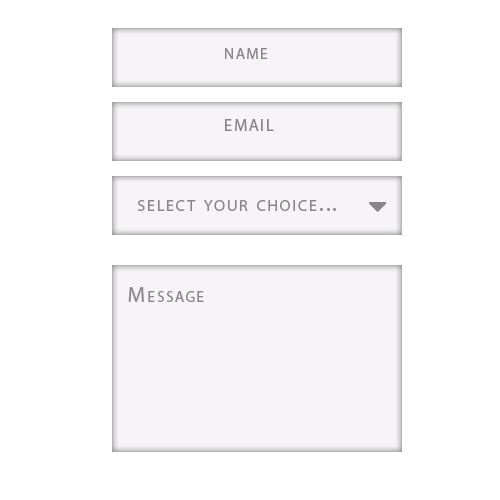
<style>
.page{position:relative;width:500px;height:500px;background:#ffffff}
.page>*{position:absolute;margin:0}
.t1{font:22.2px "MyriadPro-Regular";letter-spacing:0.1em;color:#898588;font-variant:small-caps}
.t2{font:23.6px "MyriadPro-Regular";letter-spacing:0.1em;color:#898588;font-variant:small-caps}
.t3{font:23.3px "MyriadPro-Regular";letter-spacing:0.1em;color:#898588;font-variant:small-caps}
.t4{font:21.9px "MyriadPro-Regular";letter-spacing:0.1em;color:#898588;font-variant:small-caps}
</style>
<div class="page">
<p class="t1" style="left:225px;top:48px;width:43px;height:12px">name</p>
<p class="t2" style="left:225px;top:119px;width:49px;height:12px">email</p>
<p class="t3" style="left:137px;top:200px;width:199px;height:11px">select your choice...</p>
<p class="t4" style="left:128px;top:287px;width:76px;height:15px">Message</p>
</div>
